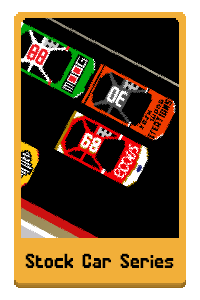
<style>
.page{position:relative;width:200px;height:300px;background:#000000}
.page>*{position:absolute;margin:0}
.t1{font:20px "Leaderboard";color:#000000}
</style>
<div class="page">
<p class="t1" style="left:25px;top:253px;width:149px;height:15px">Stock Car Series</p>
</div>
